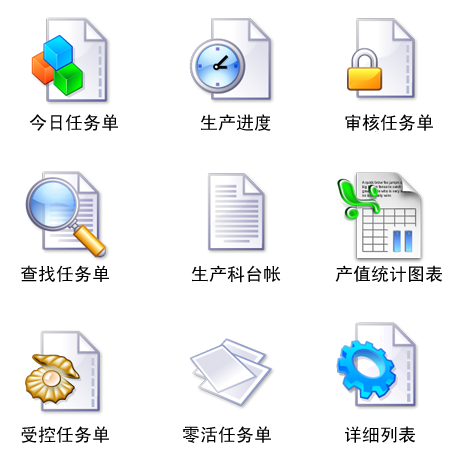
<style>
.page{position:relative;width:454px;height:454px;background:#ffffff}
.page>*{position:absolute;margin:0}
.t1{font:18px "SimHei";color:#000000}
</style>
<div class="page">
<p class="t1" style="left:21px;top:114px;width:421px;height:329px">今日任务单         生产进度        审核任务单<br><br><br><br><br><br><br>查找任务单         生产科台帐      产值统计图表<br><br><br><br><br><br><br><br>受控任务单        零活任务单        详细列表</p>
</div>
